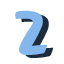
<style>
.page{position:relative;width:64px;height:64px;background:#ffffff}
.page>*{position:absolute;margin:0}
.t1{font:66px "Samba"}
</style>
<div class="page">
<p class="t1" style="left:21px;top:13px;width:33px;height:45px">2</p>
</div>
